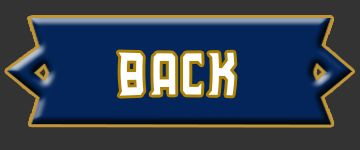
<style>
.page{position:relative;width:360px;height:150px;background:#333333}
.page>*{position:absolute;margin:0}
.t1{font:62.5px "Lorde-Havana";letter-spacing:0.1em;color:#ffffff;scale:0.75 1}
</style>
<div class="page">
<p class="t1" style="left:118px;top:52px;width:117px;height:44px">back</p>
</div>
